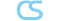
<style>
.page{position:relative;width:62px;height:21px;background:#ffffff}
.page>*{position:absolute;margin:0}
.t1{font:28px "InterGTB";color:#87ceeb}
</style>
<div class="page">
<p class="t1" style="left:16px;top:0px;width:15px;height:20px">C</p>
<p class="t1" style="left:28px;top:0px;width:15px;height:20px">S</p>
</div>
